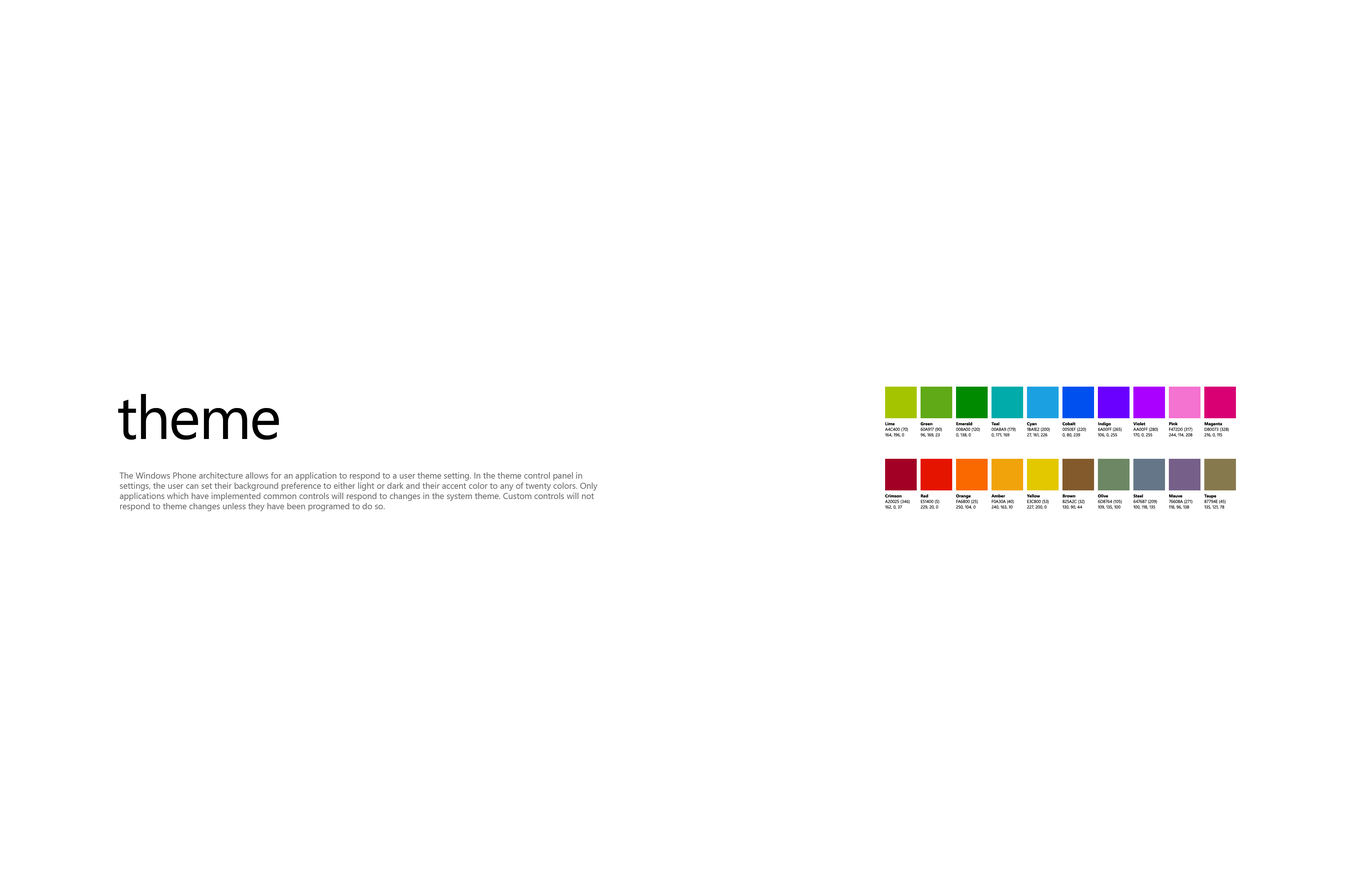
<style>
.page{position:relative;width:1358px;height:878px;background:#ffffff}
.page>*{position:absolute;margin:0}
.t1{font:60.6px "SegoeUI";letter-spacing:-0.025em;color:#000000}
.t2{font:8.5px "SegoeUI";color:#666666}
</style>
<div class="page">
<p class="t1" style="left:118px;top:394px;width:161px;height:46px">theme</p>
<p class="t2" style="left:119px;top:472px;width:478px;height:39px">The Windows Phone architecture allows for an application to respond to a user theme setting. In the theme control panel in settings, the user can set their background preference to either light or dark and their accent color to any of twenty colors. Only applications which have implemented common controls will respond to changes in the system theme. Custom controls will not respond to theme changes unless they have been programed to do so.</p>
</div>
